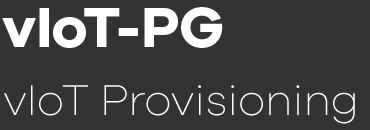
<style>
.page{position:relative;width:370px;height:130px;background:#333333}
.page>*{position:absolute;margin:0}
.t1{font:58.5px "GalanoGrotesque-Bold";letter-spacing:-0.01em;color:#ffffff}
.t2{font:44.5px "GalanoGrotesque-ExtraLight";letter-spacing:-0.01em;color:#ffffff}
</style>
<div class="page">
<p class="t1" style="left:2px;top:7px;width:221px;height:41px">vIoT-PG</p>
<p class="t2" style="left:4px;top:85px;width:351px;height:39px">vIoT Provisioning</p>
</div>
